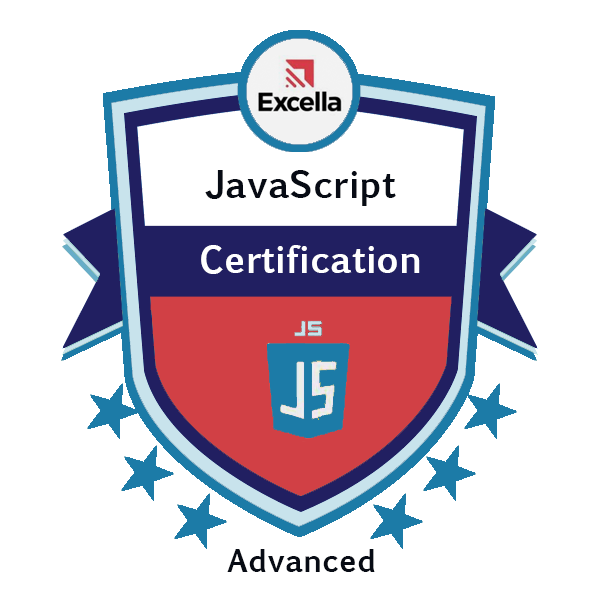
<style>
.page{position:relative;width:600px;height:600px;background:#ffffff}
.page>*{position:absolute;margin:0}
.t1{font:36px "EuphemiaUCAS-Bold";color:#070b14}
.t2{font:36px "EuphemiaUCAS-Bold";color:#ffffff}
.t3{font:30px "EuphemiaUCAS-Bold";color:#070b14}
</style>
<div class="page">
<p class="t1" style="left:205px;top:170px;width:191px;height:36px">JavaScript</p>
<p class="t2" style="left:201px;top:245px;width:219px;height:29px">Certification</p>
<p class="t3" style="left:227px;top:549px;width:148px;height:23px">Advanced</p>
</div>
